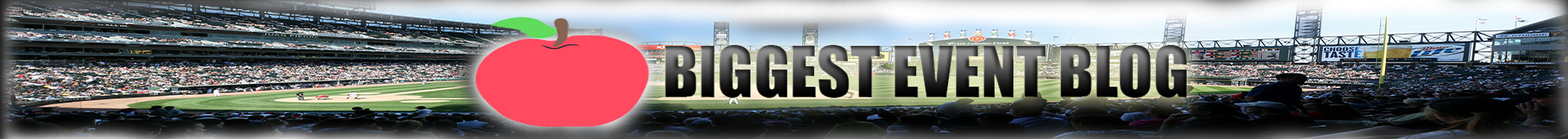
<style>
.page{position:relative;width:1568px;height:139px}
.page>*{position:absolute;margin:0}
.t1{font:65.3px "Impact"}
.t2{font:58.8px "Impact"}
</style>
<div class="page">
<p class="t1" style="left:665px;top:45px;width:522px;height:53px"><span class="t2"> </span>BIGGEST EVENT BLOG</p>
</div>
